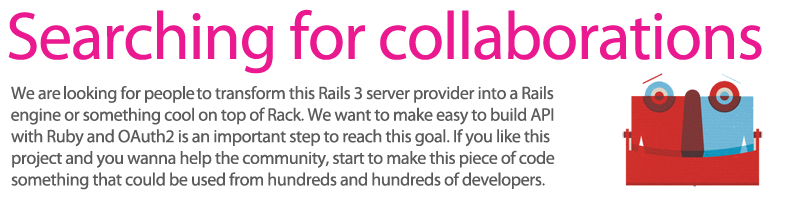
<style>
.page{position:relative;width:800px;height:198px;background:#ffffff}
.page>*{position:absolute;margin:0}
.t1{font:68px "MyriadPro-Regular";letter-spacing:-0.02em;color:#ea198f}
.t2{font:18px "MyriadPro-Regular";letter-spacing:-0.02em;color:#5b5b5b}
</style>
<div class="page">
<p class="t1" style="left:8px;top:9px;width:754px;height:65px">Searching for collaborations</p>
<p class="t2" style="left:11px;top:86px;width:544px;height:104px">We are looking for people to transform this Rails 3 server provider into a Rails <br>engine or something cool on top of Rack. We want to make easy to build API <br>with Ruby and OAuth2 is an important step to reach this goal. If you like this <br>project and you wanna help the community, start to make this piece of code <br>something that could be used from hundreds and hundreds of developers.</p>
</div>
